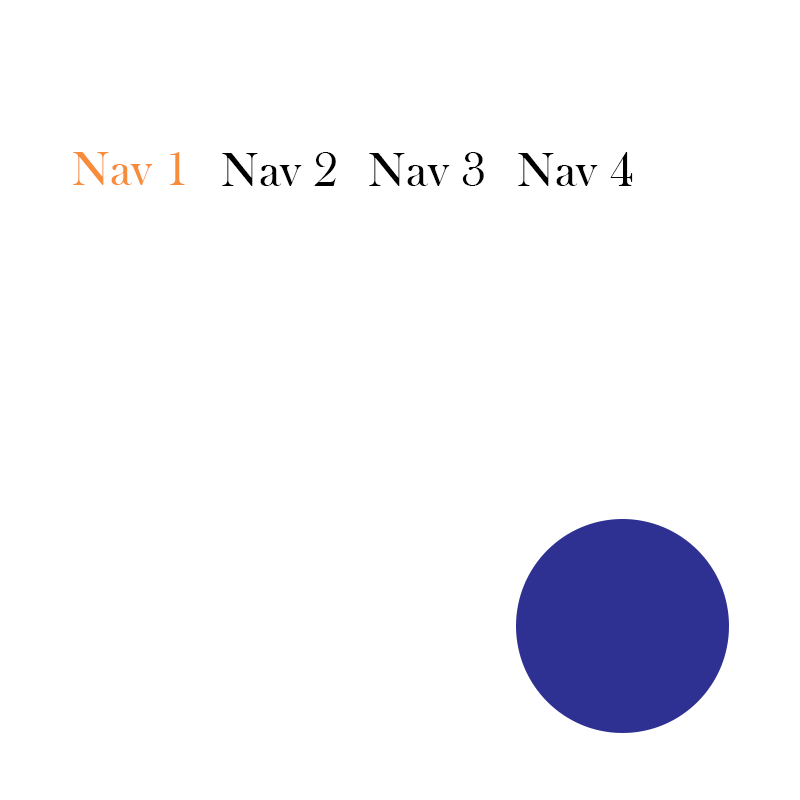
<style>
.page{position:relative;width:800px;height:800px;background:#ffffff}
.page>*{position:absolute;margin:0}
.t1{font:50px "BaskOldFace";color:#f78c3b}
.t2{font:50px "BaskOldFace";color:#000000}
.t3{font:12px "BaskOldFace";color:#000000}
</style>
<div class="page">
<p class="t1" style="left:73px;top:152px;width:112px;height:33px">Nav 1</p>
<p class="t2" style="left:222px;top:152px;width:114px;height:34px">Nav 2</p>
<p class="t2" style="left:369px;top:152px;width:115px;height:34px">Nav 3</p>
<p class="t3" style="left:518px;top:152px;width:115px;height:34px">Nav 4</p>
</div>
